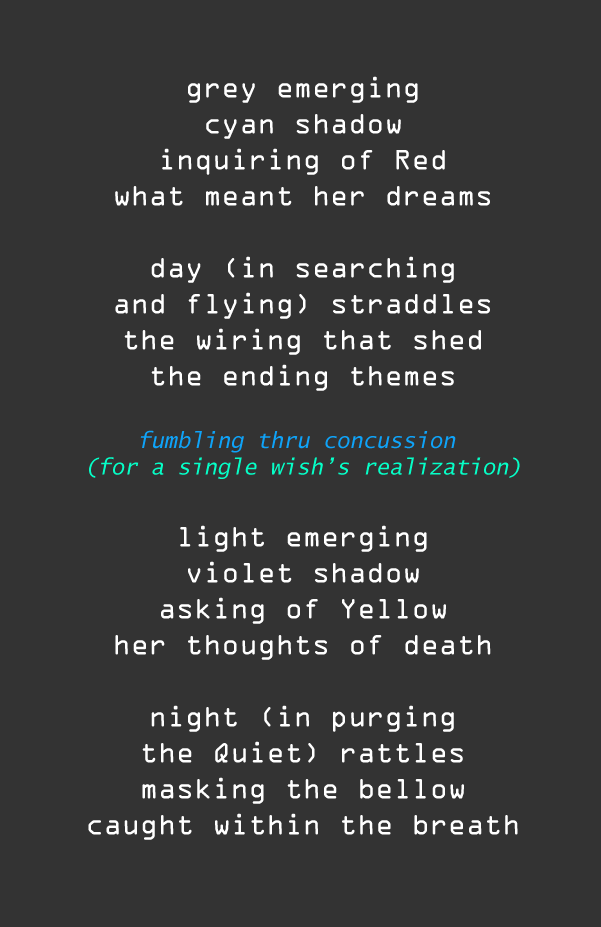
<style>
.page{position:relative;width:601px;height:927px;background:#333333}
.page>*{position:absolute;margin:0}
.t1{font:30px "OCRAExtended";color:#ffffff}
.t2{font:22px "LucidaSans-TypewriterOblique";color:#0ea3f9}
.t3{font:22px "LucidaSans-TypewriterOblique";color:#05ffc7}
</style>
<div class="page">
<p class="t1" style="left:88px;top:76px;width:432px;height:764px;text-align:center">grey emerging<br>cyan shadow<br>inquiring of Red<br>what meant her dreams<br><br>day (in searching<br>and flying) straddles<br>the wiring that shed<br>the ending themes<br><br><span class="t2">fumbling thru concussion <br></span><span class="t3">(for a single wish’s realization)<br></span><br>light emerging<br>violet shadow<br>asking of Yellow<br>her thoughts of death<br><br>night (in purging<br>the Quiet) rattles<br>masking the bellow<br>caught within the breath</p>
</div>
